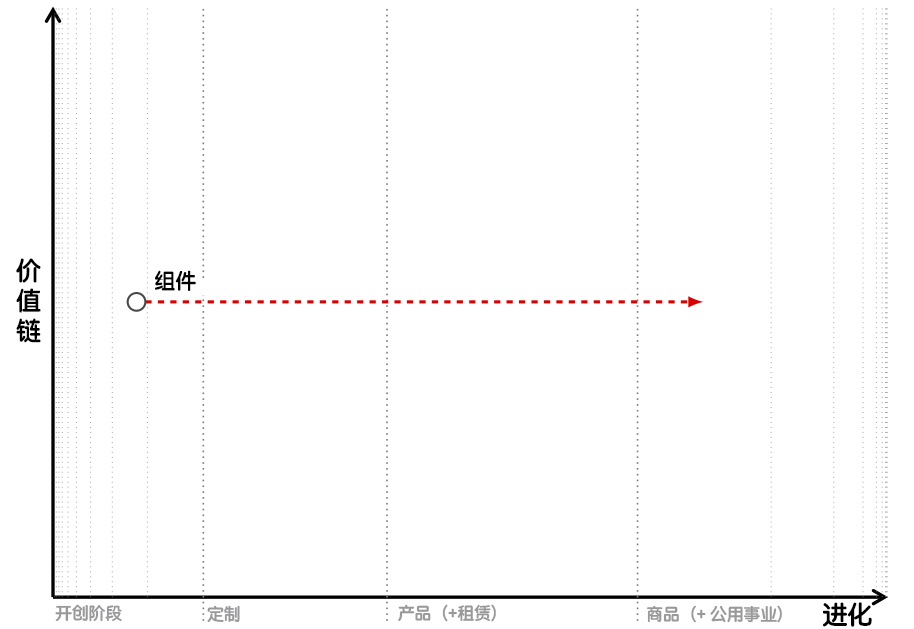
<style>
.page{position:relative;width:914px;height:629px;background:#ffffff}
.page>*{position:absolute;margin:0}
.t1{font:25px "STYuanti-SC-Bold";color:#000000}
.t2{font:20.8px "STYuanti-SC-Bold";color:#000000}
.t3{font:16.7px "STYuanti-SC-Bold";color:#99999b}
</style>
<div class="page">
<p class="t1" style="left:16px;top:258px;width:25px;height:85px">价<br>值<br>链</p>
<p class="t2" style="left:155px;top:270px;width:41px;height:21px">组件</p>
<p class="t3" style="left:55px;top:604px;width:67px;height:18px">开创阶段</p>
<p class="t3" style="left:207px;top:605px;width:33px;height:18px">定制</p>
<p class="t3" style="left:398px;top:604px;width:98px;height:18px">产品（+租赁）</p>
<p class="t3" style="left:647px;top:605px;width:135px;height:18px">商品（+ 公用事业）</p>
<p class="t1" style="left:823px;top:602px;width:49px;height:25px">进化</p>
</div>
